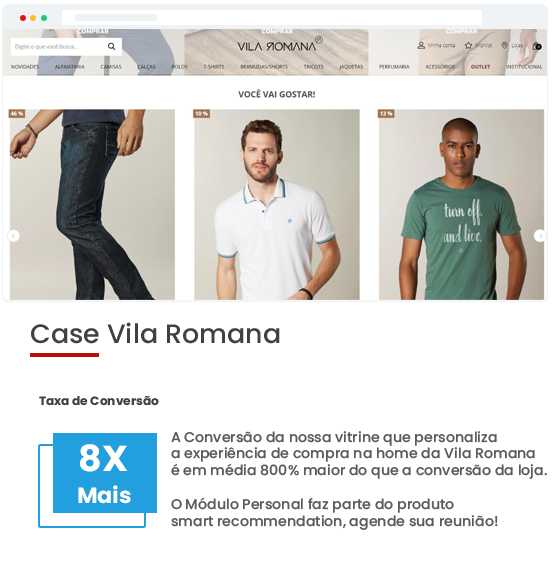
<style>
.page{position:relative;width:552px;height:572px;background:#ffffff}
.page>*{position:absolute;margin:0}
.t1{font:26.6px "Poppins-Medium";color:#414143}
.t2{font:12px "Poppins-Bold";color:#414143}
.t3{font:14px "Poppins-Medium";color:#5b5b5d}
.t4{font:36px "Poppins-Bold";color:#ffffff}
.t5{font:21.9px "Poppins-Bold";color:#ffffff}
</style>
<div class="page">
<p class="t1" style="left:31px;top:322px;width:249px;height:22px">Case Vila Romana</p>
<p class="t2" style="left:39px;top:395px;width:120px;height:11px">Taxa de Conversão</p>
<p class="t3" style="left:171px;top:431px;width:376px;height:99px">A Conversão da nossa vitrine que personaliza<br>a experiência de compra na home da Vila Romana<br>é em média 800% maior do que a conversão da loja.<br><br>O Módulo Personal faz parte do produto<br>smart recommendation, agende sua reunião!</p>
<p class="t4" style="left:80px;top:444px;width:48px;height:28px">8X</p>
<p class="t5" style="left:78px;top:485px;width:53px;height:19px">Mais</p>
</div>
